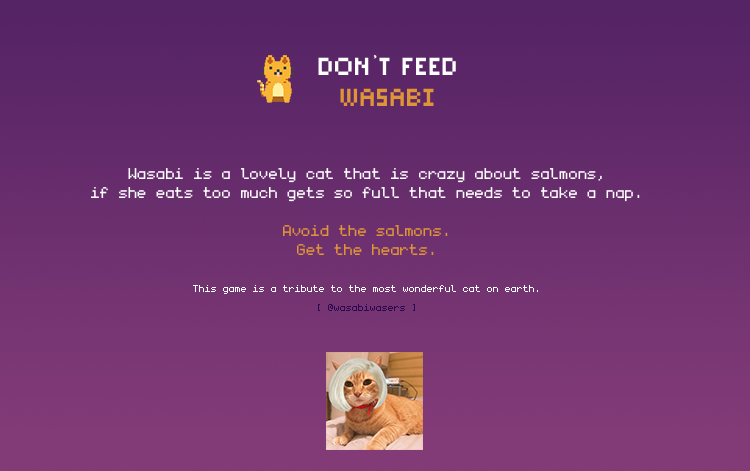
<style>
.page{position:relative;width:750px;height:471px}
.page>*{position:absolute;margin:0}
.t1{font:26.6px/31.1px "PixelSix02";color:#de9537;text-transform:uppercase}
.t2{font:26.6px/31.1px "PixelSix02";color:#ffffff;text-transform:uppercase}
.t3{font:26.6px/31.1px "Icekingdom-Bold";color:#ffffff;text-transform:uppercase}
.t4{font:26.6px/28.2px "PixelSix02";color:#ffffff;text-transform:uppercase}
.t5{font:25px/18.9px "monogramextended";color:#ffffff}
.t6{font:21.4px/18.9px "monogramextended";color:#ffffff}
.t7{font:25px/18.9px "monogramextended";color:#de9537}
.t8{font:16px/18.9px "monogramextended";color:#ffffff}
.t9{font:16px/18.9px "monogramextended";color:#2a0850}
</style>
<div class="page">
<p class="t1" style="left:318px;top:55px;width:138px;height:51px;text-align:center"><span class="t2">don</span><span class="t3">’</span><span class="t2">t </span><span class="t4">feed<br></span>wasabi</p>
<p class="t5" style="left:91px;top:168px;width:549px;height:143px;text-align:center"><span class="t6"><br><br></span>Wasabi is a lovely cat that is crazy about salmons, <br>if she eats too much gets so full that needs to take a nap. <br><br><span class="t7">Avoid the salmons. <br>Get the hearts.<br><br></span><span class="t8">This game is a tribute to the most wonderful cat on earth.<br></span><span class="t9">[ @wasabiwasers ]</span></p>
</div>
